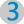
<style>
.page{position:relative;width:24px;height:24px;background:#c9c9c9}
.page>*{position:absolute;margin:0}
.t1{font:24px "MicrosoftYaHei";color:#008ac1;font-weight:bold}
</style>
<div class="page">
<p class="t1" style="left:7px;top:1px;width:12px;height:20px">3</p>
</div>
